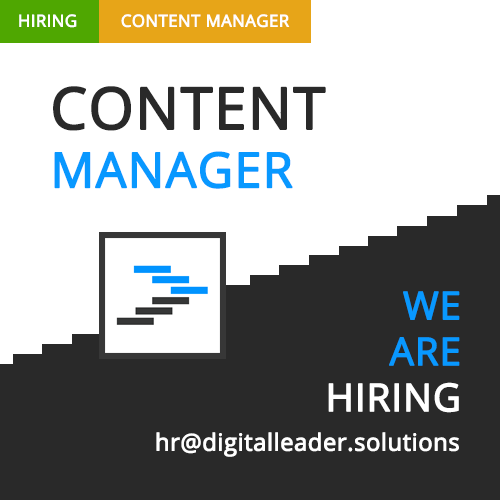
<style>
.page{position:relative;width:500px;height:500px;background:#ffffff}
.page>*{position:absolute;margin:0}
.t1{font:16.7px "OpenSans";color:#ffffff;text-transform:uppercase;font-weight:bold}
.t2{font:58px "OpenSans";color:#292929;text-transform:uppercase;font-weight:bold}
.t3{font:48.6px "OpenSans";color:#0898ff;text-transform:uppercase;font-weight:bold}
.t4{font:38.3px "OpenSans";color:#0898ff;text-transform:uppercase;font-weight:bold}
.t5{font:38.3px "OpenSans";color:#ffffff;text-transform:uppercase;font-weight:bold}
.t6{font:23.6px "OpenSans";color:#ffffff;font-weight:bold}
</style>
<div class="page">
<p class="t1" style="left:19px;top:14px;width:58px;height:14px">hiring</p>
<p class="t1" style="left:121px;top:14px;width:169px;height:14px">Content manager</p>
<p class="t2" style="left:53px;top:86px;width:273px;height:103px">content<br><span class="t3">manager</span></p>
<p class="t4" style="left:328px;top:291px;width:132px;height:122px;text-align:right">We<br>are<br><span class="t5">hiring</span></p>
<p class="t6" style="left:156px;top:432px;width:303px;height:25px">hr@digitalleader.solutions</p>
</div>
